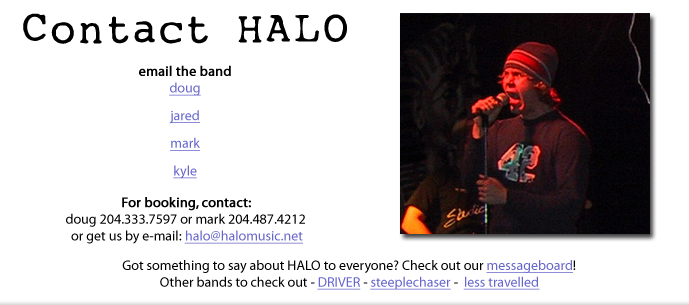
<style>
.page{position:relative;width:689px;height:305px;background:#ffffff}
.page>*{position:absolute;margin:0}
.t1{font:41px "My-type-of-font";color:#000000;font-weight:bold}
.t2{font:14px "Myriad-Roman";color:#6766cc;text-decoration:underline}
.t3{font:14px "Myriad-Roman";color:#626262;font-weight:bold}
.t4{font:14px "Myriad-Roman";color:#000000;font-weight:bold}
.t5{font:14px "Myriad-Roman";color:#000000}
</style>
<div class="page">
<p class="t1" style="left:23px;top:13px;width:324px;height:31px">Contact HALO</p>
<p class="t2" style="left:139px;top:65px;width:92px;height:114px;text-align:center"><span class="t3"><br></span><span class="t4">email the band<br></span>doug<br><br>jared<br><br>mark<br><br>kyle</p>
<p class="t5" style="left:66px;top:197px;width:239px;height:47px;text-align:center"><span class="t4">For booking, contact:<br></span>doug 204.333.7597 or mark 204.487.4212 <br>or get us by e-mail: <span class="t2">halo@halomusic.net</span></p>
<p class="t5" style="left:122px;top:260px;width:454px;height:30px;text-align:center">Got something to say about HALO to everyone? Check out our <span class="t2">messageboard</span>!<br>Other bands to check out - <span class="t2">DRIVER</span> - <span class="t2">steeplechaser</span> -  <span class="t2">less travelled</span></p>
</div>
